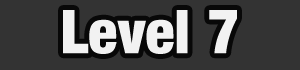
<style>
.page{position:relative;width:300px;height:70px;background:#333333}
.page>*{position:absolute;margin:0}
.t1{font:60px "Harvest";color:#f2f2f2}
</style>
<div class="page">
<p class="t1" style="left:63px;top:10px;width:174px;height:44px">Level 7</p>
</div>
